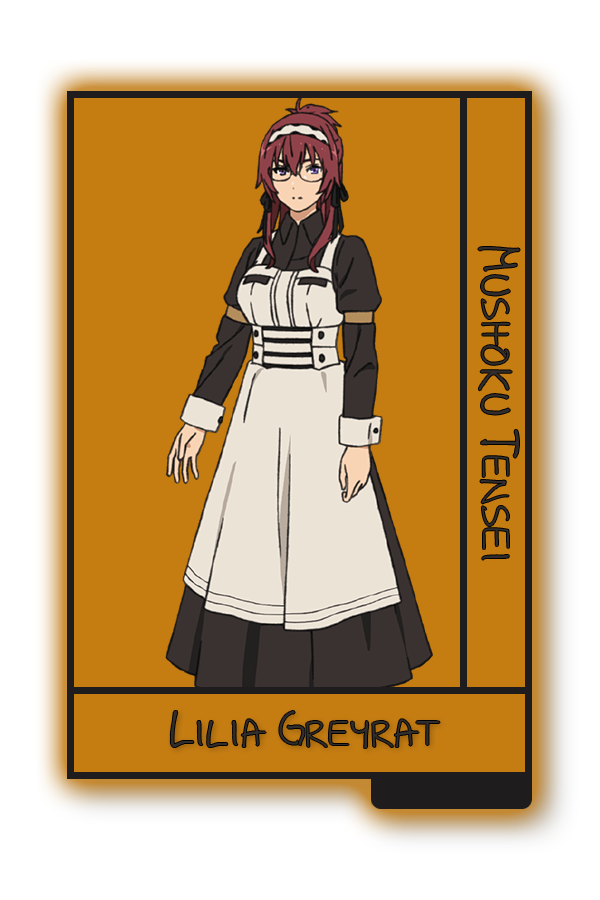
<style>
.page{position:relative;width:600px;height:900px;background:#c57d12}
.page>*{position:absolute;margin:0}
.t1{font:41px "AllCaps";color:#312d2d}
.t2{font:38.3px "AllCaps";color:#312d2d}
</style>
<div class="page">
<p class="t1" style="left:478px;top:247px;width:42px;height:313px;rotate:90deg">Mushoku Tensei</p>
<p class="t2" style="left:170px;top:711px;width:270px;height:37px">Lilia Greyrat</p>
</div>
